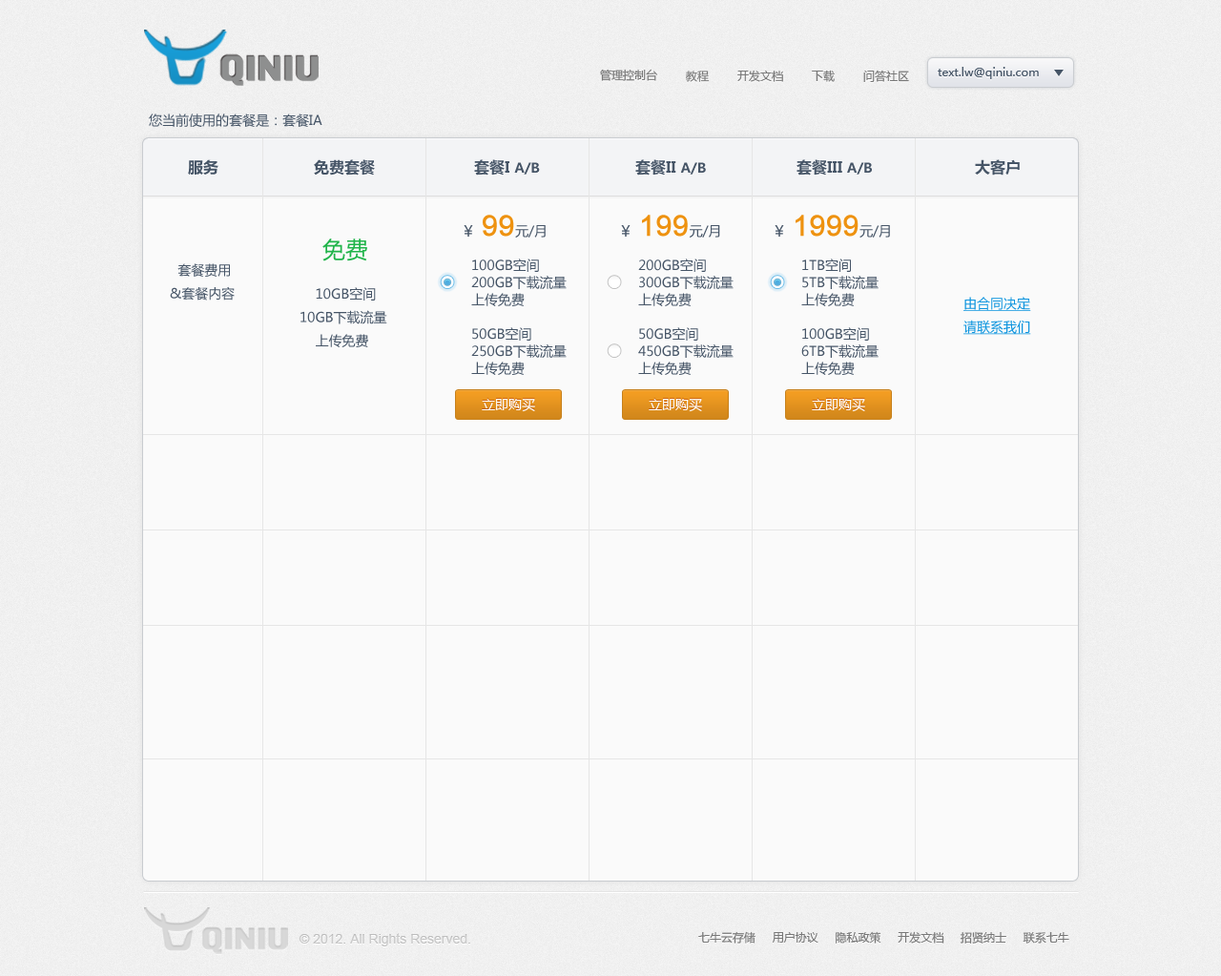
<style>
.page{position:relative;width:1221px;height:976px;background:#fafafa}
.page>*{position:absolute;margin:0}
.t1{font:11.5px "MicrosoftYaHei";color:#787878}
.t2{font:11.5px "MicrosoftYaHei";color:#465567}
.t3{font:13.4px "MicrosoftYaHei";color:#465567}
.t4{font:15.3px "MicrosoftYaHei-Bold";color:#585858}
.t5{font:13.4px "MicrosoftYaHei-Bold";color:#585858}
.t6{font:28.6px "ArialMT";color:#ee9210;font-weight:bold}
.t7{font:15.3px "MicrosoftYaHei";color:#465567}
.t8{font:22.9px "MicrosoftYaHei";color:#20b44a}
.t9{font:13.4px/17.2px "MicrosoftYaHei";color:#465567}
.t10{font:13.4px "MicrosoftYaHei";color:#0c94de;text-decoration:underline}
.t11{font:13.4px "MicrosoftYaHei";color:#ffffff}
.t12{font:13.4px "ArialMT";color:#c6c6c6}
</style>
<div class="page">
<p class="t1" style="left:600px;top:69px;width:57px;height:12px">管理控制台</p>
<p class="t1" style="left:686px;top:71px;width:24px;height:11px">教程</p>
<p class="t1" style="left:738px;top:70px;width:45px;height:12px">开发文档</p>
<p class="t1" style="left:812px;top:70px;width:23px;height:12px">下载</p>
<p class="t1" style="left:864px;top:70px;width:45px;height:12px">问答社区</p>
<p class="t2" style="left:938px;top:67px;width:101px;height:12px">text.lw@qiniu.com</p>
<p class="t3" style="left:149px;top:114px;width:174px;height:13px">您当前使用的套餐是：套餐IA</p>
<p class="t4" style="left:188px;top:159px;width:31px;height:17px">服务</p>
<p class="t4" style="left:314px;top:159px;width:61px;height:17px">免费套餐</p>
<p class="t4" style="left:474px;top:159px;width:66px;height:17px">套餐I <span class="t5">A/B</span></p>
<p class="t4" style="left:636px;top:159px;width:70px;height:17px">套餐II <span class="t5">A/B</span></p>
<p class="t4" style="left:797px;top:159px;width:75px;height:17px">套餐III <span class="t5">A/B</span></p>
<p class="t4" style="left:975px;top:159px;width:45px;height:17px">大客户</p>
<p class="t3" style="left:483px;top:215px;width:63px;height:23px"><span class="t6">99</span>元/月</p>
<p class="t6" style="left:642px;top:215px;width:78px;height:23px">199<span class="t3">元/月</span></p>
<p class="t6" style="left:796px;top:215px;width:94px;height:23px">1999<span class="t3">元/月</span></p>
<p class="t7" style="left:464px;top:225px;width:9px;height:12px">￥</p>
<p class="t7" style="left:621px;top:225px;width:10px;height:12px">￥</p>
<p class="t7" style="left:775px;top:225px;width:9px;height:12px">￥</p>
<p class="t8" style="left:323px;top:239px;width:44px;height:22px">免费</p>
<p class="t3" style="left:170px;top:263px;width:65px;height:38px">套餐费用<br>&amp;套餐内容</p>
<p class="t9" style="left:471px;top:259px;width:96px;height:116px">100GB空间<br>200GB下载流量<br>上传免费<br><br>50GB空间<br>250GB下载流量<br>上传免费</p>
<p class="t9" style="left:638px;top:259px;width:96px;height:116px">200GB空间<br>300GB下载流量<br>上传免费<br><br>50GB空间<br>450GB下载流量<br>上传免费</p>
<p class="t9" style="left:802px;top:259px;width:77px;height:116px">1TB空间<br>5TB下载流量<br>上传免费<br><br>100GB空间<br>6TB下载流量<br>上传免费</p>
<p class="t3" style="left:301px;top:287px;width:86px;height:60px">10GB空间<br>10GB下载流量<br>    上传免费</p>
<p class="t10" style="left:964px;top:297px;width:68px;height:38px">由合同决定<br>请联系我们</p>
<p class="t11" style="left:482px;top:399px;width:53px;height:13px">立即购买</p>
<p class="t11" style="left:649px;top:399px;width:53px;height:13px">立即购买</p>
<p class="t11" style="left:812px;top:399px;width:54px;height:13px">立即购买</p>
<p class="t12" style="left:299px;top:933px;width:171px;height:14px">© 2012. All Rights Reserved.</p>
<p class="t1" style="left:699px;top:931px;width:371px;height:13px">七牛云存储     用户协议     隐私政策     开发文档     招贤纳士     联系七牛</p>
</div>
